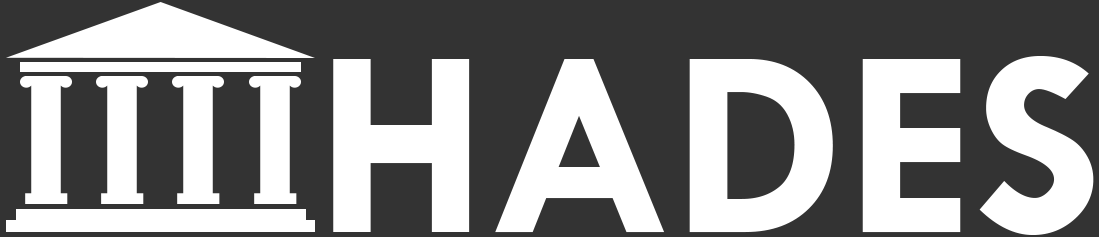
<style>
.page{position:relative;width:1099px;height:237px;background:#333333}
.page>*{position:absolute;margin:0}
.t1{font:270px "TwCenMT-Bold";color:#ffffff}
</style>
<div class="page">
<p class="t1" style="left:333px;top:56px;width:761px;height:179px">HADES</p>
</div>
